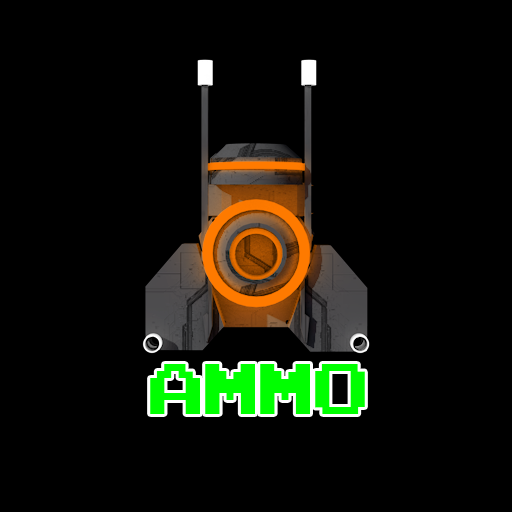
<style>
.page{position:relative;width:512px;height:512px;background:#000000}
.page>*{position:absolute;margin:0}
.t1{font:100px "ArcadeClassic";color:#00ff00}
</style>
<div class="page">
<p class="t1" style="left:150px;top:364px;width:215px;height:50px">Ammo</p>
</div>
